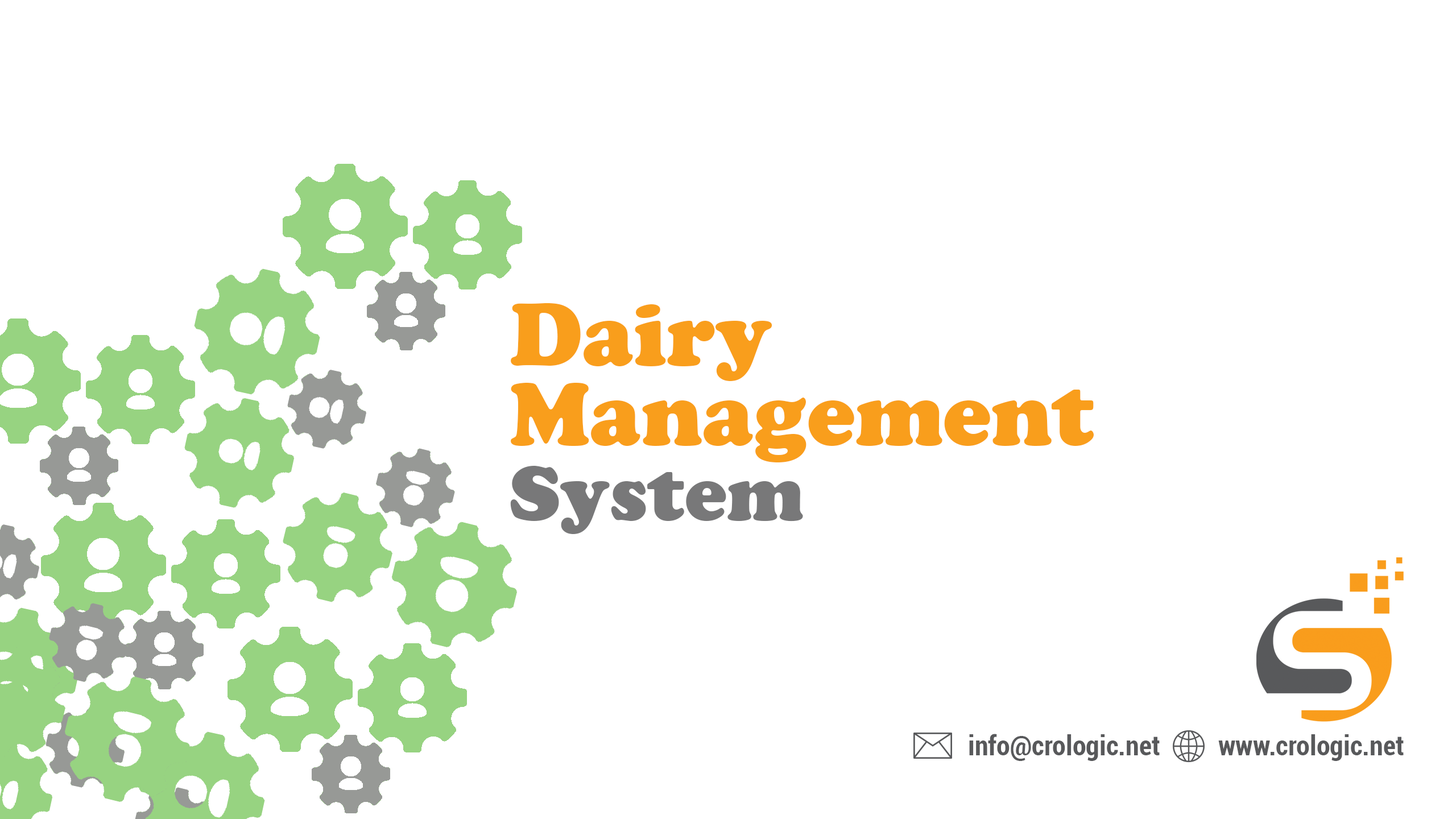
<style>
.page{position:relative;width:1456px;height:819px;background:#ffffff}
.page>*{position:absolute;margin:0}
.t1{font:91px/79.6px "CooperBlack";color:#f99e1c}
.t2{font:79.6px "CooperBlack";color:#787879}
.t3{font:27.3px "Roboto-BoldCondensed";color:#58595b}
</style>
<div class="page">
<p class="t1" style="left:511px;top:303px;width:583px;height:159px">Dairy<br>Management</p>
<p class="t2" style="left:510px;top:466px;width:293px;height:68px">System</p>
<p class="t3" style="left:969px;top:734px;width:191px;height:27px">info@crologic.net</p>
<p class="t3" style="left:1218px;top:734px;width:186px;height:27px">www.crologic.net</p>
</div>
